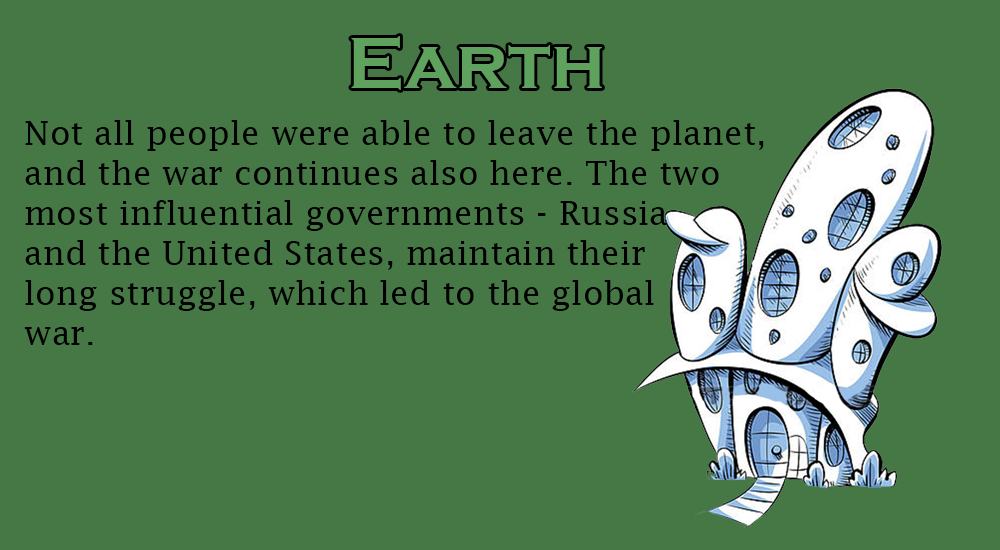
<style>
.page{position:relative;width:1000px;height:550px;background:#457845}
.page>*{position:absolute;margin:0}
.t1{font:75px "CopperplateGothic-Bold";color:#5ea25e}
.t2{font:33.3px "LucidaFax";color:#000000}
</style>
<div class="page">
<p class="t1" style="left:351px;top:36px;width:251px;height:54px">Earth</p>
<p class="t2" style="left:24px;top:120px;width:740px;height:225px">Not all people were able to leave the planet,<br>and the war continues also here. The two<br>most influential governments - Russia<br>and the United States, maintain their<br>long struggle, which led to the global <br>war.</p>
</div>
